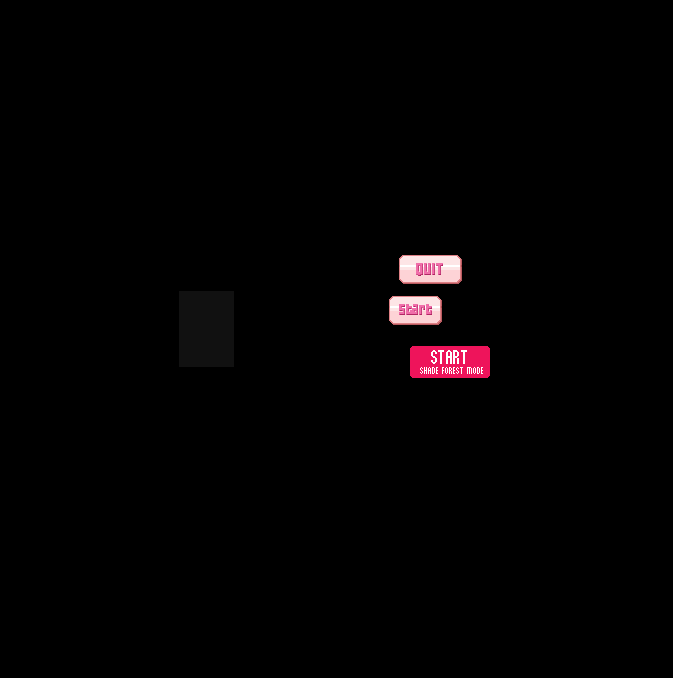
<style>
.page{position:relative;width:673px;height:678px;background:#000000}
.page>*{position:absolute;margin:0}
.t1{font:15px "04b19";color:#f06eaa;text-transform:uppercase;scale:0.92 1}
.t2{font:14px "04b19";letter-spacing:-0.05em;color:#f06eaa;scale:0.92 1}
.t3{font:16px "SilkyWonderland";letter-spacing:-0.05em;color:#ffffff;text-transform:uppercase}
.t4{font:8px "SilkyWonderland";color:#ffffff;text-transform:uppercase}
</style>
<div class="page">
<p class="t1" style="left:416px;top:263px;width:27px;height:13px">quit</p>
<p class="t2" style="left:399px;top:304px;width:33px;height:11px">Start</p>
<p class="t3" style="left:431px;top:350px;width:36px;height:14px">start</p>
<p class="t4" style="left:420px;top:367px;width:63px;height:7px">shade forest mode</p>
</div>
